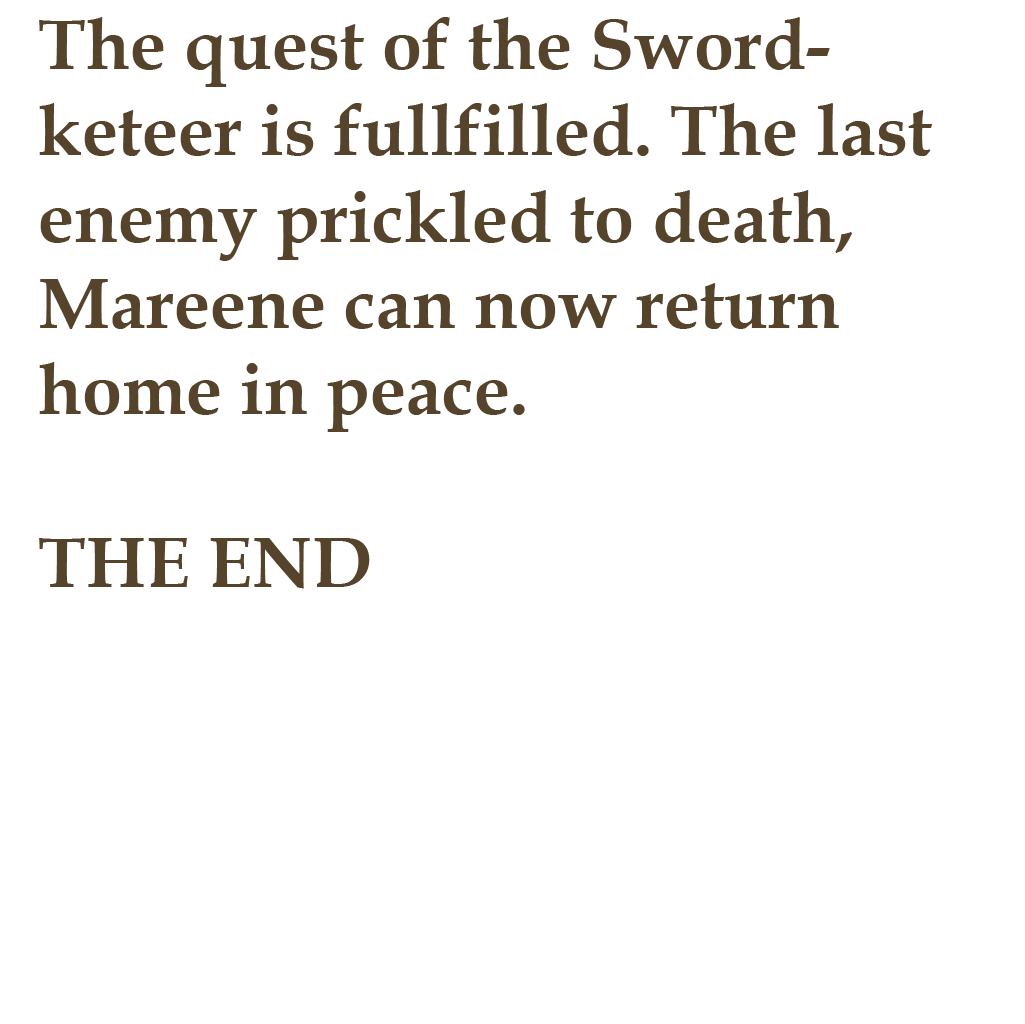
<style>
.page{position:relative;width:1025px;height:1024px;background:#ffffff}
.page>*{position:absolute;margin:0}
.t1{font:72px "BookAntiqua-Bold";color:#56432c}
</style>
<div class="page">
<p class="t1" style="left:39px;top:17px;width:894px;height:572px">The quest of the Sword-<br>keteer is fullfilled. The last enemy prickled to death, Mareene can now return home in peace.<br><br>THE END</p>
</div>
